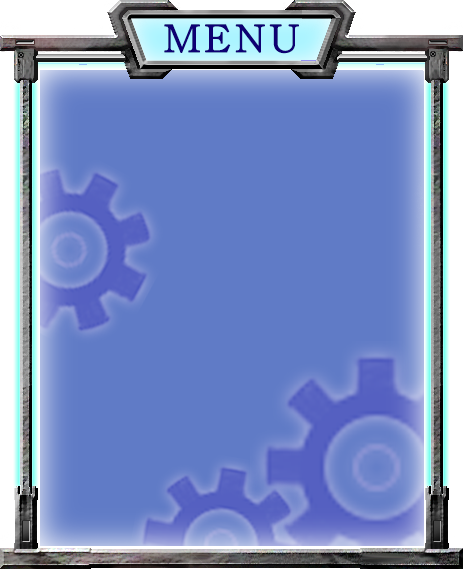
<style>
.page{position:relative;width:463px;height:569px;background:#607bc6}
.page>*{position:absolute;margin:0}
.t1{font:37.5px "HyhwpEQ";letter-spacing:0.05em;color:#0e0073;font-weight:bold;scale:1.1 1}
</style>
<div class="page">
<p class="t1" style="left:164px;top:24px;width:135px;height:30px">MENU</p>
</div>
